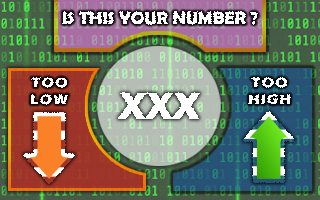
<style>
.page{position:relative;width:320px;height:200px}
.page>*{position:absolute;margin:0}
.t1{font:18px "BerlinSansFBDemi-Bold";color:#ffffff}
.t2{font:14px "ErasITC-Bold";letter-spacing:0.1em;color:#ffffff}
.t3{font:39.3px "ErasITC-Bold";color:#ffffff}
</style>
<div class="page">
<p class="t1" style="left:62px;top:11px;width:196px;height:14px">IS THIS YOUR NUMBER ?</p>
<p class="t2" style="left:30px;top:77px;width:39px;height:28px;text-align:center">TOO<br>LOW</p>
<p class="t2" style="left:248px;top:77px;width:43px;height:28px;text-align:center">TOO<br>HIGH</p>
<p class="t3" style="left:117px;top:92px;width:84px;height:27px">XXX</p>
</div>
